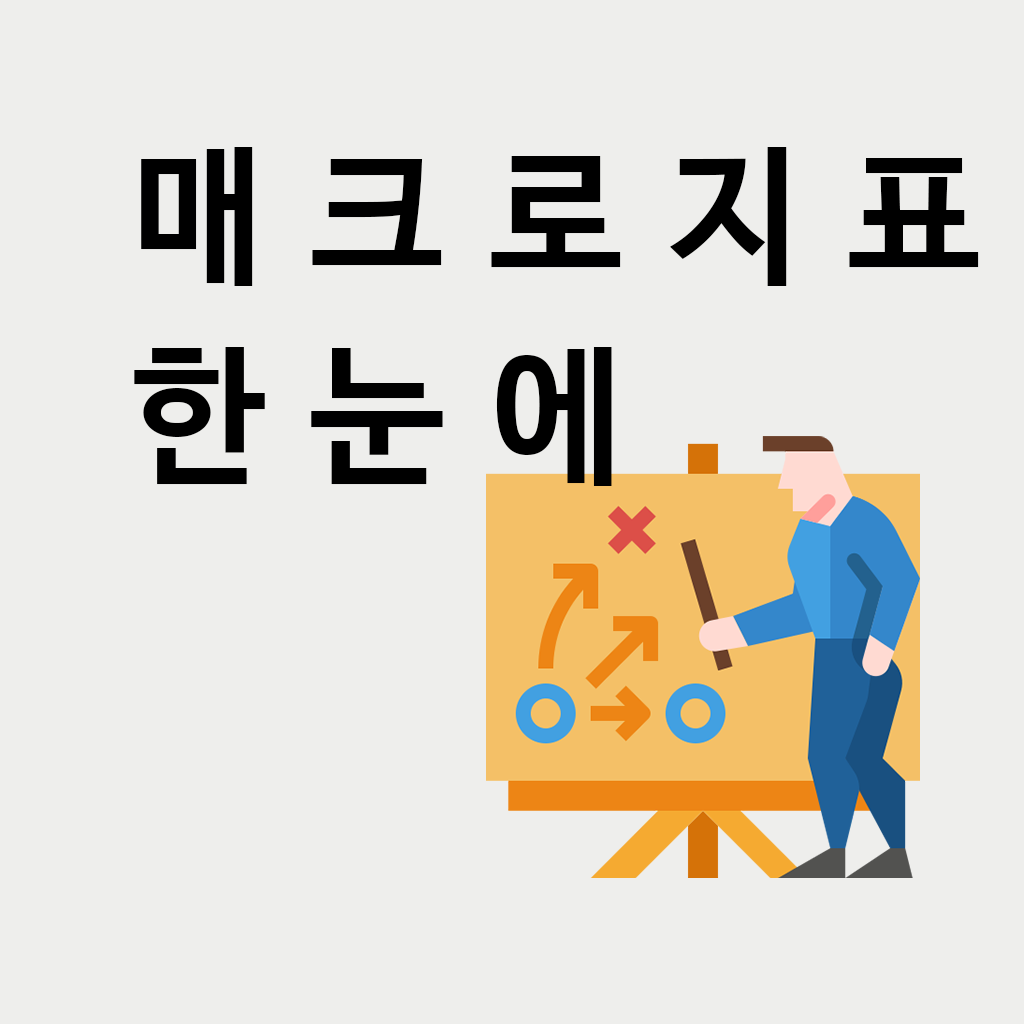
<style>
.page{position:relative;width:1024px;height:1024px;background:#eeeeec}
.page>*{position:absolute;margin:0}
.t1{font:150px/200px "NanumBarunGothicBold";letter-spacing:0.3em;color:#000000}
</style>
<div class="page">
<p class="t1" style="left:134px;top:147px;width:845px;height:339px">매크로지표<br>한눈에</p>
</div>
